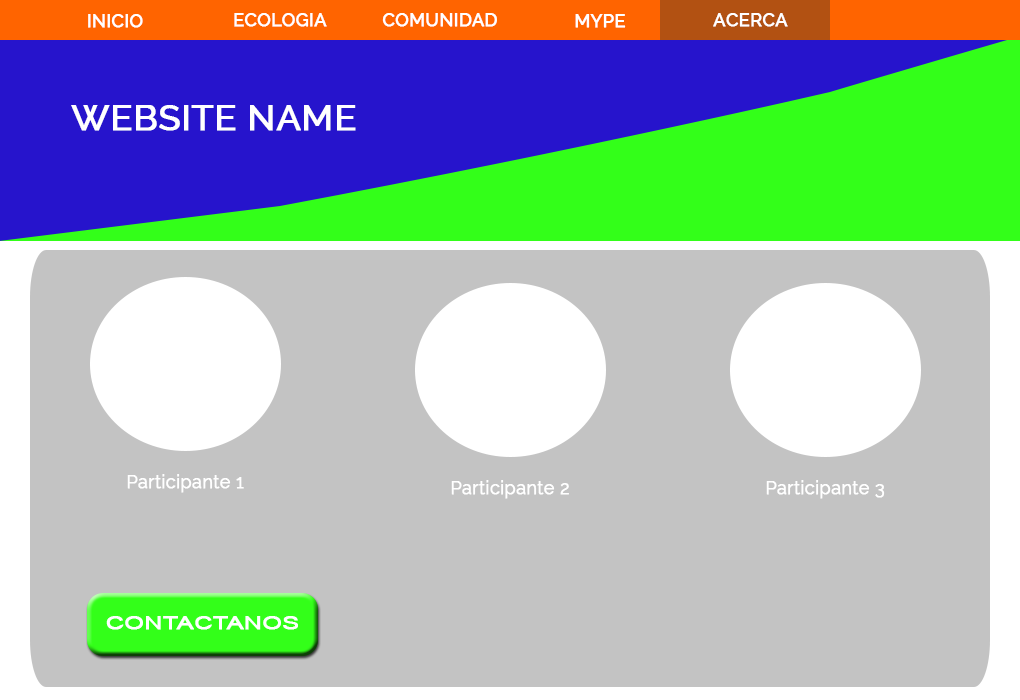
<style>
.page{position:relative;width:1020px;height:700px;background:#c3c3c3}
.page>*{position:absolute;margin:0}
.t1{font:18px "Raleway-Medium";color:#ffffff;font-weight:bold}
.t2{font:36px "Raleway-Medium";color:#ffffff;font-weight:bold}
.t3{font:18px "Raleway";color:#ffffff;font-weight:bold}
.t4{font:18px "ArialMT";color:#ffffff;font-weight:bold;scale:1.38 1}
</style>
<div class="page">
<p class="t1" style="left:88px;top:14px;width:55px;height:14px">INICIO</p>
<p class="t1" style="left:234px;top:13px;width:93px;height:14px">ECOLOGIA</p>
<p class="t1" style="left:382px;top:13px;width:115px;height:14px">COMUNIDAD</p>
<p class="t1" style="left:575px;top:14px;width:51px;height:14px">MYPE</p>
<p class="t1" style="left:713px;top:13px;width:75px;height:14px">ACERCA</p>
<p class="t2" style="left:71px;top:105px;width:285px;height:26px">WEBSITE NAME</p>
<p class="t3" style="left:127px;top:474px;width:117px;height:19px">Participante 1</p>
<p class="t3" style="left:451px;top:480px;width:118px;height:19px">Participante 2</p>
<p class="t3" style="left:766px;top:480px;width:119px;height:19px">Participante 3</p>
<p class="t4" style="left:106px;top:616px;width:192px;height:14px">CONTACTANOS</p>
</div>
